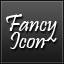
<style>
.page{position:relative;width:64px;height:64px}
.page>*{position:absolute;margin:0}
.t1{font:25px/17px "Pristina-Regular";color:#ffffff}
</style>
<div class="page">
<p class="t1" style="left:6px;top:14px;width:51px;height:35px">Fancy<br> Icon~</p>
</div>
